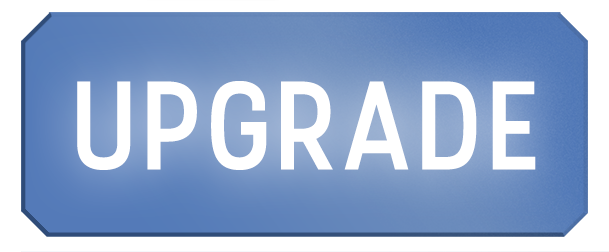
<style>
.page{position:relative;width:609px;height:252px;background:#ffffff}
.page>*{position:absolute;margin:0}
.t1{font:125.2px "Stellar-Medium";color:#ffffff}
</style>
<div class="page">
<p class="t1" style="left:77px;top:81px;width:459px;height:89px">UPGRADE</p>
</div>
